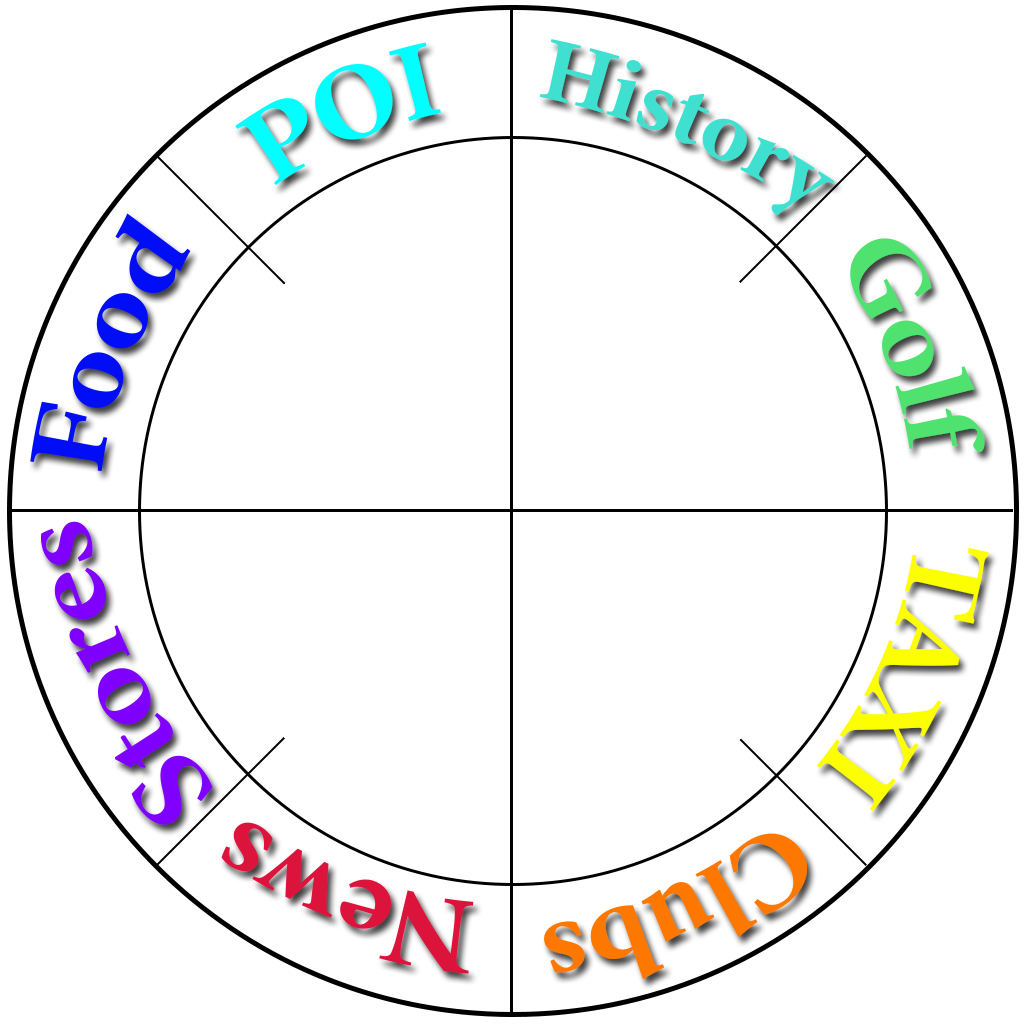
<style>
.page{position:relative;width:1024px;height:1024px;background:#ffffff}
.page>*{position:absolute;margin:0}
.t1{font:90px "MinionPro-BoldCn";color:#40e0d0}
.t2{font:110px "MinionPro-BoldCn";color:#00ffff}
.t3{font:110px "MinionPro-BoldCn";color:#010df7}
.t4{font:110px "MinionPro-BoldCn";color:#4fe26e}
.t5{font:110px "MinionPro-BoldCn";color:#7f00ff}
.t6{font:110px "MinionPro-BoldCn";color:#fcff00}
.t7{font:110px "MinionPro-BoldCn";color:#dc143c}
.t8{font:110px "MinionPro-BoldCn";color:#fe7800}
</style>
<div class="page">
<p class="t1" style="left:539px;top:39px;width:296px;height:176px;rotate:29deg">History</p>
<p class="t2" style="left:235px;top:42px;width:206px;height:144px;rotate:-18deg">POI</p>
<p class="t3" style="left:30px;top:213px;width:161px;height:259px;rotate:-65deg">Food</p>
<p class="t4" style="left:850px;top:238px;width:135px;height:214px;rotate:73deg">Golf</p>
<p class="t5" style="left:41px;top:521px;width:172px;height:304px;rotate:-113deg">Stores</p>
<p class="t6" style="left:817px;top:547px;width:172px;height:265px;rotate:116deg">TAXI</p>
<p class="t7" style="left:221px;top:822px;width:253px;height:152px;rotate:-157deg">News</p>
<p class="t8" style="left:544px;top:833px;width:263px;height:147px;rotate:159deg">Clubs</p>
</div>
